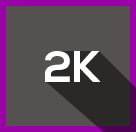
<style>
.page{position:relative;width:136px;height:132px;background:#545150}
.page>*{position:absolute;margin:0}
.t1{font:44px "NexaBold";color:#ffffff}
</style>
<div class="page">
<p class="t1" style="left:45px;top:51px;width:56px;height:31px">2K</p>
</div>
